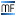
<style>
.page{position:relative;width:16px;height:16px;background:#ffffff}
.page>*{position:absolute;margin:0}
.t1{font:11px "Circula-Medium";color:#000000}
</style>
<div class="page">
<p class="t1" style="left:1px;top:4px;width:14px;height:8px">MF</p>
</div>
